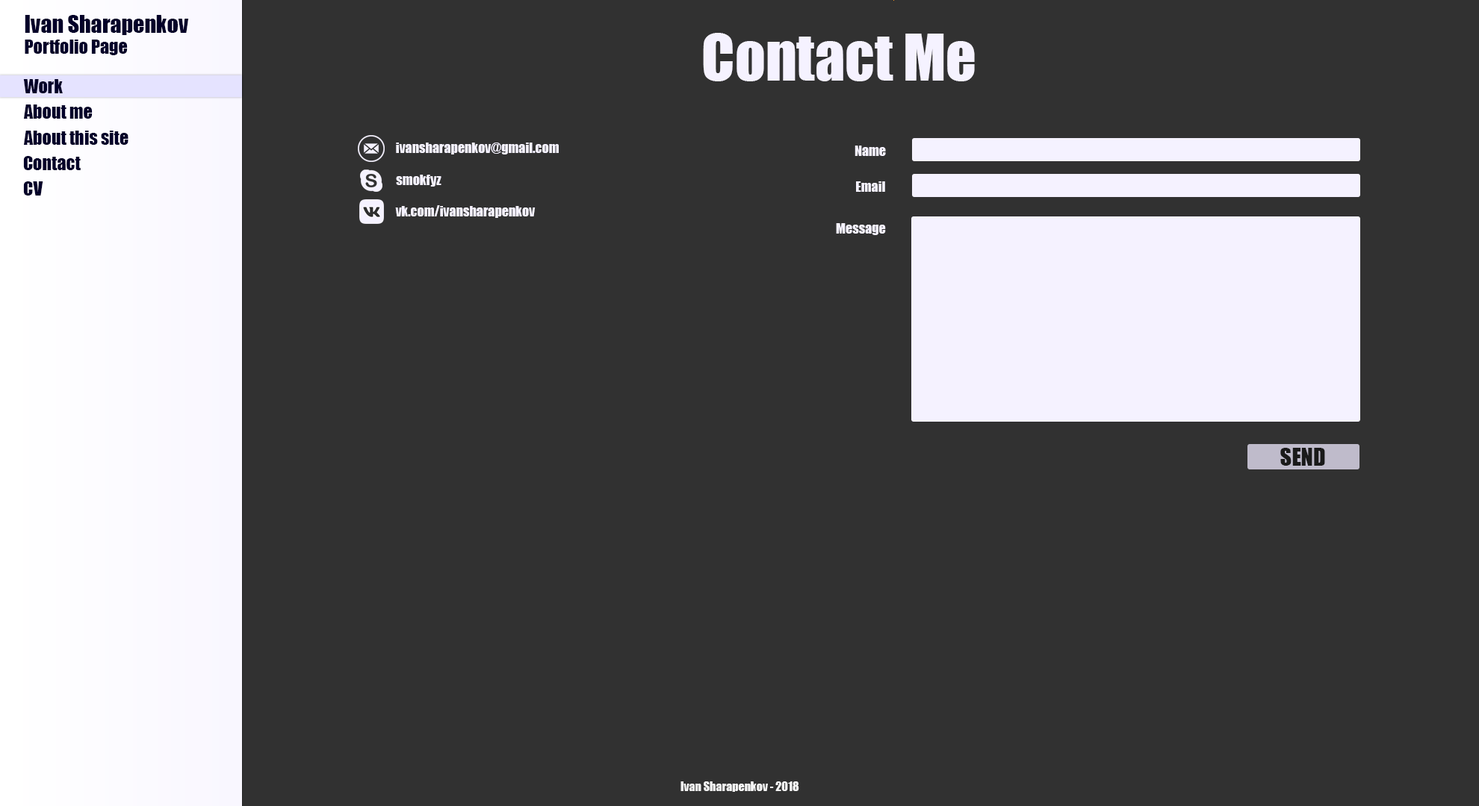
<style>
.page{position:relative;width:1479px;height:806px;background:#313131}
.page>*{position:absolute;margin:0}
.t1{font:22.4px "Impact";color:#030029}
.t2{font:17.9px "Impact";color:#030029}
.t3{font:59.7px "Impact";color:#f5f2ff}
.t4{font:13.4px "Impact";color:#f5f2ff}
.t5{font:22.4px "Impact";color:#1a1a1a}
.t6{font:11.9px "Impact";color:#f5f5f5}
</style>
<div class="page">
<p class="t1" style="left:25px;top:15px;width:164px;height:40px">Ivan Sharapenkov<br><span class="t2">Portfolio Page</span></p>
<p class="t3" style="left:703px;top:33px;width:272px;height:48px">Contact Me</p>
<p class="t2" style="left:23px;top:79px;width:40px;height:14px">Work</p>
<p class="t2" style="left:24px;top:105px;width:69px;height:14px">About me</p>
<p class="t2" style="left:24px;top:131px;width:104px;height:14px">About this site</p>
<p class="t4" style="left:396px;top:143px;width:163px;height:12px">ivansharapenkov@gmail.com</p>
<p class="t4" style="left:854px;top:146px;width:32px;height:10px">Name</p>
<p class="t2" style="left:23px;top:156px;width:58px;height:14px">Contact</p>
<p class="t2" style="left:23px;top:181px;width:20px;height:15px">CV</p>
<p class="t4" style="left:396px;top:175px;width:45px;height:12px">smokfyz</p>
<p class="t4" style="left:856px;top:181px;width:29px;height:11px">Email</p>
<p class="t4" style="left:395px;top:205px;width:140px;height:13px">vk.com/ivansharapenkov</p>
<p class="t4" style="left:836px;top:223px;width:50px;height:12px">Message</p>
<p class="t5" style="left:1280px;top:448px;width:45px;height:18px">SEND</p>
<p class="t6" style="left:680px;top:782px;width:119px;height:10px">Ivan Sharapenkov - 2018</p>
</div>
